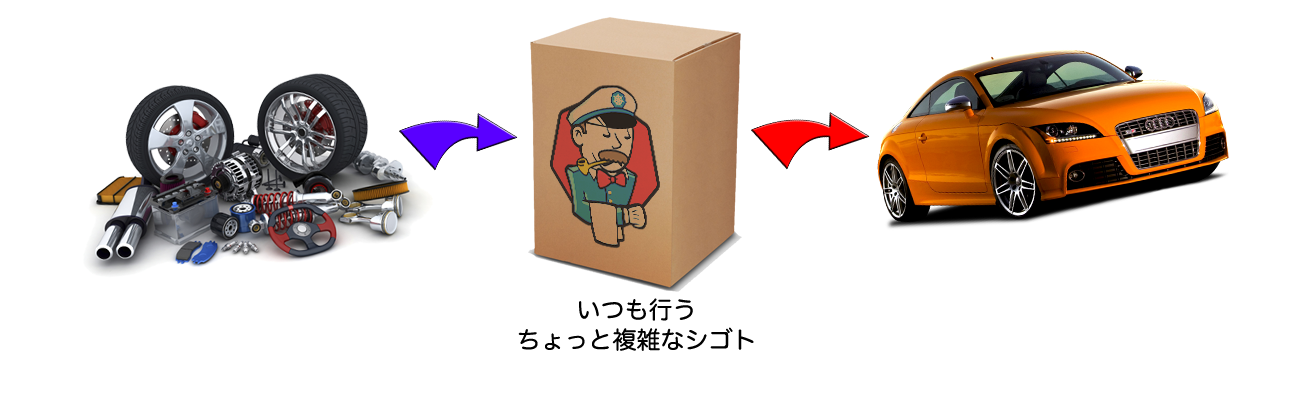
<style>
.page{position:relative;width:1303px;height:401px;background:#ffffff}
.page>*{position:absolute;margin:0}
.t1{font:24px/30px "HiraMaruProN-W4";color:#010101}
</style>
<div class="page">
<p class="t1" style="left:518px;top:298px;width:236px;height:53px;text-align:center">いつも行う<br>ちょっと複雑なシゴト</p>
</div>
